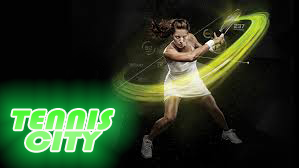
<style>
.page{position:relative;width:299px;height:168px}
.page>*{position:absolute;margin:0}
.t1{font:28px/21px "Bauhaus93";text-transform:uppercase;font-style:italic;scale:1.24 1}
</style>
<div class="page">
<p class="t1" style="left:12px;top:110px;width:102px;height:41px;text-align:center">Tennis <br>City</p>
</div>
